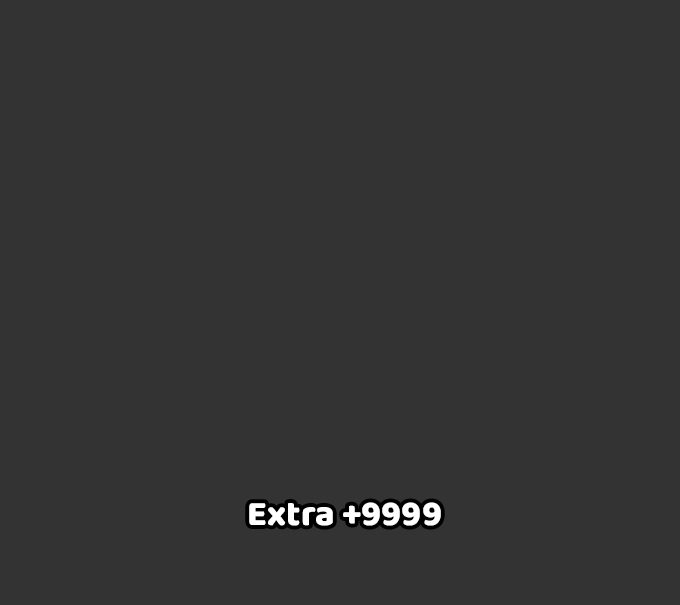
<style>
.page{position:relative;width:680px;height:605px;background:#333333}
.page>*{position:absolute;margin:0}
.t1{font:36.1px "Baloo2-ExtraBold";color:#ffffff}
</style>
<div class="page">
<p class="t1" style="left:249px;top:502px;width:192px;height:24px">Extra +9999</p>
</div>
